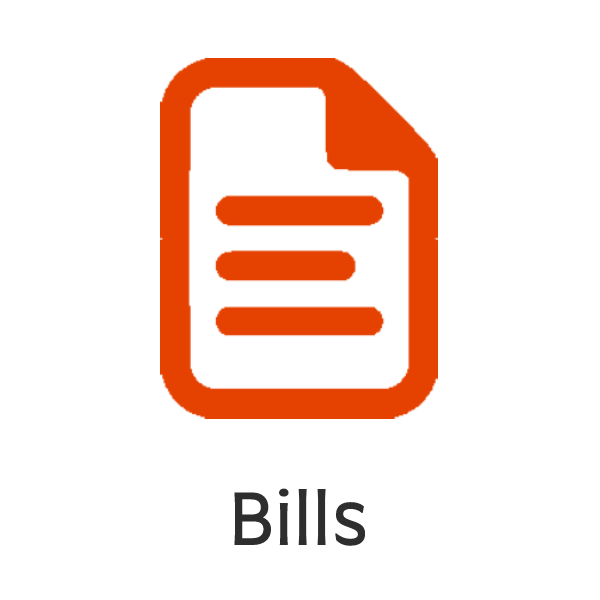
<style>
.page{position:relative;width:600px;height:600px;background:#ffffff}
.page>*{position:absolute;margin:0}
.t1{font:70px "Farro-Regular";color:#2e2e2e}
</style>
<div class="page">
<p class="t1" style="left:234px;top:488px;width:132px;height:58px">Bills</p>
</div>
